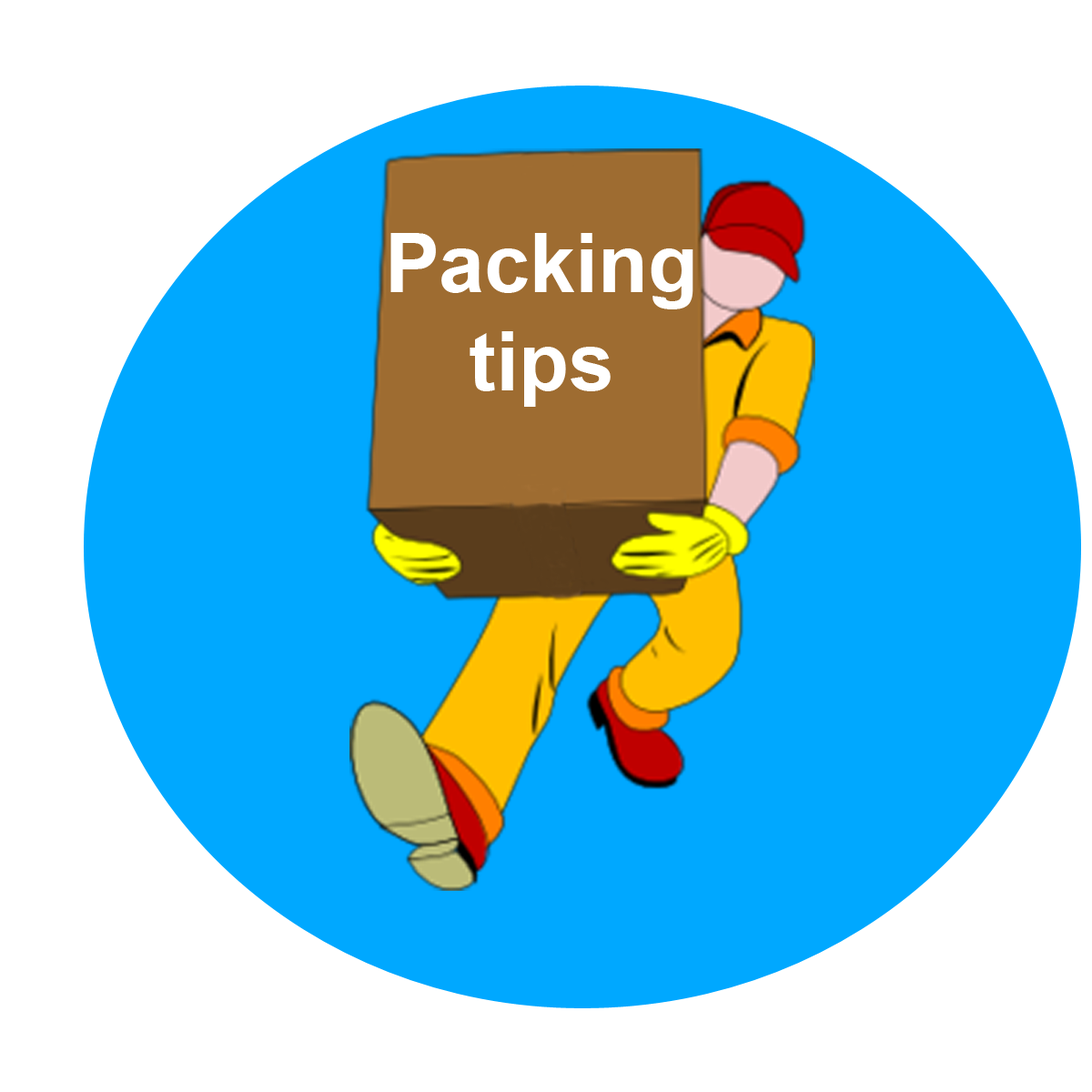
<style>
.page{position:relative;width:1092px;height:1092px;background:#00a8ff}
.page>*{position:absolute;margin:0}
.t1{font:81.8px "Arial-BoldMT";color:#ffffff}
</style>
<div class="page">
<p class="t1" style="left:390px;top:233px;width:303px;height:174px;text-align:center">Packing<br>tips</p>
</div>
